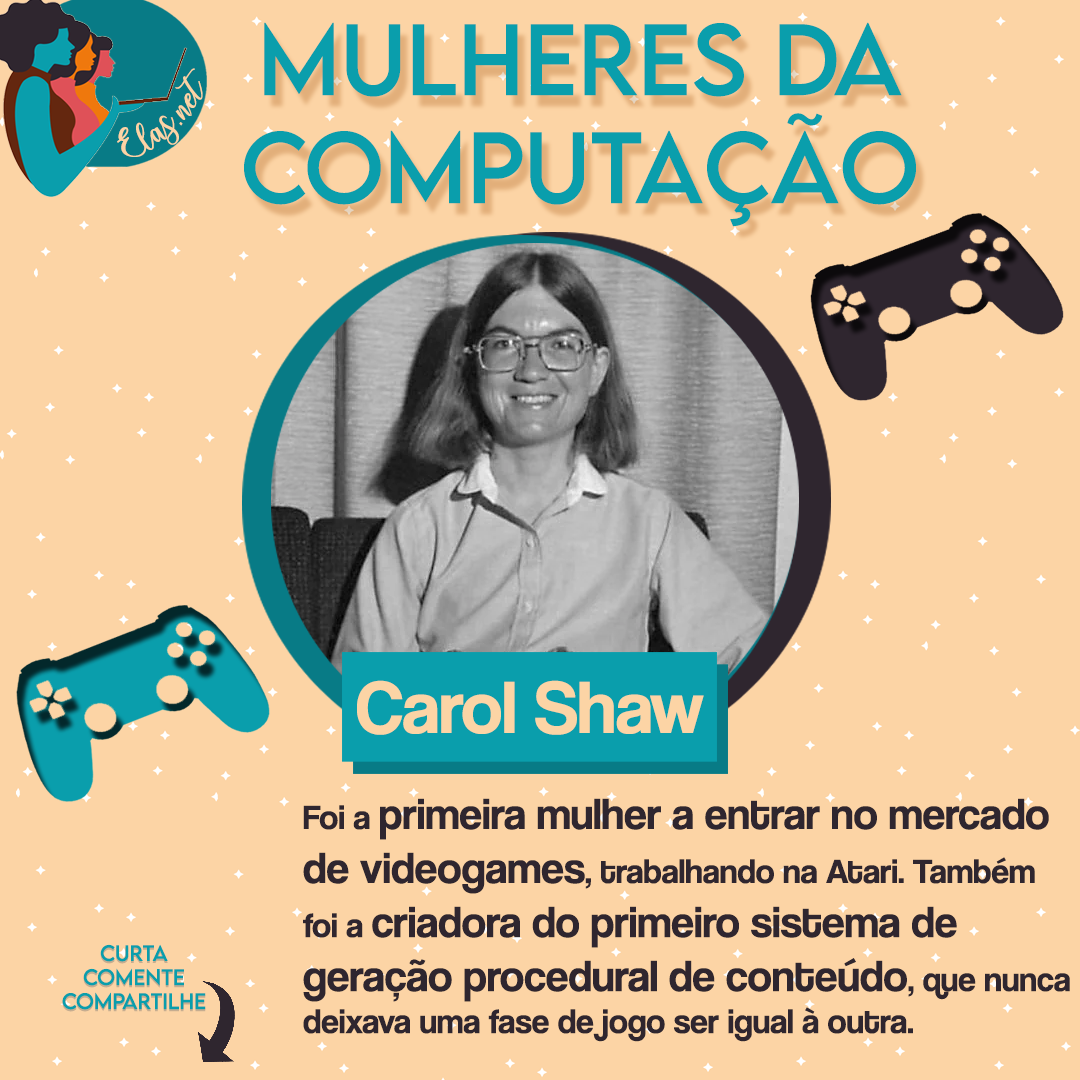
<style>
.page{position:relative;width:1080px;height:1080px;background:#fcd4a5}
.page>*{position:absolute;margin:0}
.t1{font:90px "LEMONMILK-Regular";color:#0a9eac}
.t2{font:25px "charlinda-Regular";color:#fcd4a5;scale:1.18 1}
.t3{font:76px "CoolveticaRg-Regular";color:#fcd4a5}
.t4{font:45px "CoolveticaRg-Regular";color:#2f262f}
.t5{font:35px "CoolveticaRg-Regular";color:#2f262f}
.t6{font:20px "LEMONMILK-Regular"}
.t7{font:20px "LEMONMILK-Regular";color:#0a9eac}
</style>
<div class="page">
<p class="t1" style="left:244px;top:22px;width:672px;height:205px;text-align:center">Mulheres da<br>Computação</p>
<p class="t2" style="left:117px;top:68px;width:86px;height:89px;rotate:-43deg">Elas.net</p>
<p class="t3" style="left:357px;top:680px;width:347px;height:55px">Carol Shaw</p>
<p class="t4" style="left:303px;top:798px;width:767px;height:244px"><span class="t5">Foi a </span>primeira mulher a entrar no mercado <br>de videogames<span class="t5">, trabalhando na Atari. Também <br>foi a </span>criadora do primeiro sistema de <br>geração procedural de conteúdo<span class="t5">, que nunca <br>deixava uma fase de jogo ser igual à outra.</span></p>
<p class="t6" style="left:62px;top:946px;width:144px;height:66px;text-align:center">Curta<br>Comente<br>Compartilhe</p>
<p class="t7" style="left:62px;top:944px;width:144px;height:66px;text-align:center">Curta<br>Comente<br>Compartilhe</p>
</div>
